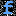
<style>
.page{position:relative;width:16px;height:16px;background:#000000}
.page>*{position:absolute;margin:0}
.t1{font:20px "CourierNewPS-BoldMT";color:#5aa4fc}
</style>
<div class="page">
<p class="t1" style="left:3px;top:1px;width:11px;height:13px">f</p>
</div>
